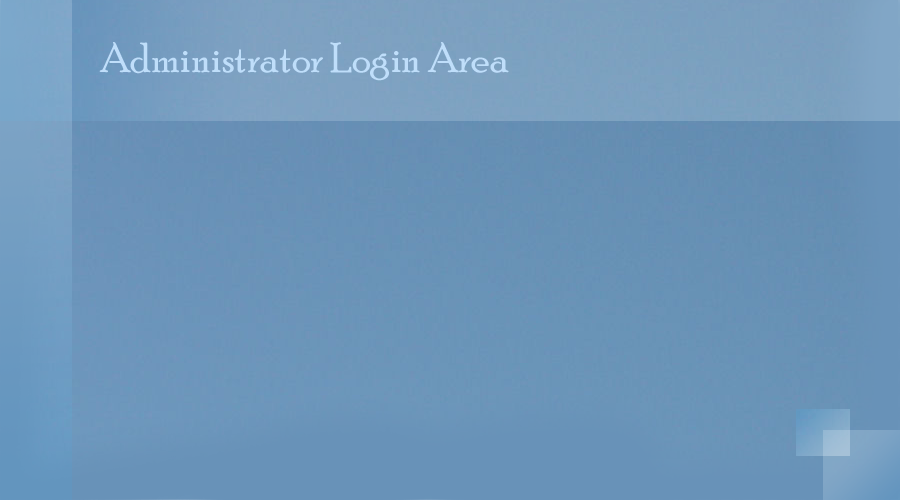
<style>
.page{position:relative;width:900px;height:500px}
.page>*{position:absolute;margin:0}
.t1{font:42px "PoorRichard-Regular";color:#bfdefa}
</style>
<div class="page">
<p class="t1" style="left:99px;top:42px;width:410px;height:39px">Administrator Login Area</p>
</div>
